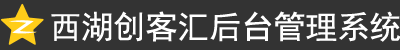
<style>
.page{position:relative;width:400px;height:50px;background:#333333}
.page>*{position:absolute;margin:0}
.t1{font:32px "SimHei";color:#ffffff}
</style>
<div class="page">
<p class="t1" style="left:51px;top:11px;width:350px;height:31px">西湖创客汇后台管理系统</p>
</div>
